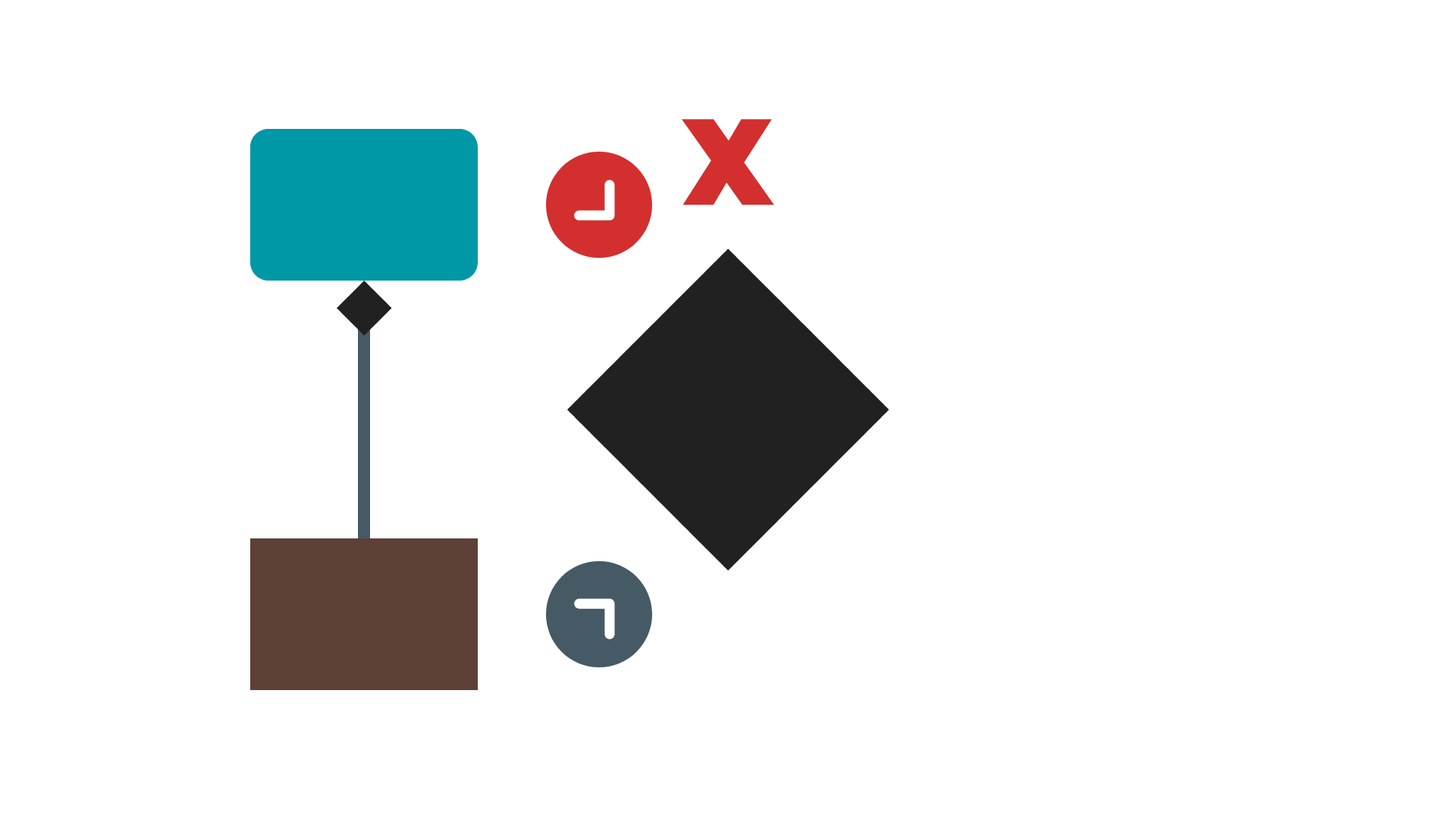
<style>
.page{position:relative;width:1456px;height:819px;background:#ffffff}
.page>*{position:absolute;margin:0}
.t1{font:120.8px "Poppins-Black";color:#d32f2f}
</style>
<div class="page">
<p class="t1" style="left:682px;top:119px;width:92px;height:86px">X</p>
</div>
